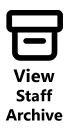
<style>
.page{position:relative;width:68px;height:131px;background:#ffffff}
.page>*{position:absolute;margin:0}
.t1{font:16px "MicrosoftTaiLe-Bold";color:#000000}
.t2{font:18px "MicrosoftTaiLe-Bold";color:#000000}
</style>
<div class="page">
<p class="t1" style="left:5px;top:68px;width:58px;height:53px;text-align:center"><span class="t2">View<br></span>Staff<br>Archive</p>
</div>
